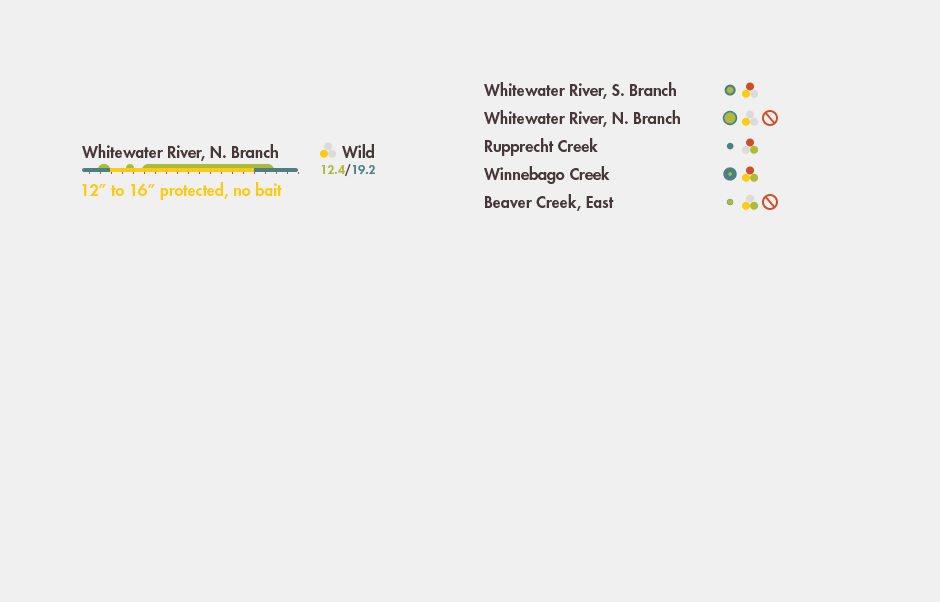
<style>
.page{position:relative;width:940px;height:602px;background:#f0f0f0}
.page>*{position:absolute;margin:0}
.t1{font:16px "FuturaStd-Heavy";color:#463838}
.t2{font:12px "FuturaStd-Heavy";color:#acbb39}
.t3{font:12px "FuturaStd-Heavy";color:#463838}
.t4{font:12px "FuturaStd-Heavy";color:#4e7f84}
.t5{font:16px "FuturaStd-Heavy";color:#fccc14}
</style>
<div class="page">
<p class="t1" style="left:484px;top:82px;width:192px;height:17px">Whitewater River, S. Branch</p>
<p class="t1" style="left:484px;top:110px;width:196px;height:17px">Whitewater River, N. Branch</p>
<p class="t1" style="left:82px;top:144px;width:196px;height:17px">Whitewater River, N. Branch</p>
<p class="t1" style="left:342px;top:144px;width:32px;height:14px">Wild</p>
<p class="t1" style="left:485px;top:138px;width:113px;height:18px">Rupprecht Creek</p>
<p class="t2" style="left:322px;top:164px;width:53px;height:13px">12.4<span class="t3">/</span><span class="t4">19.2</span></p>
<p class="t1" style="left:484px;top:166px;width:126px;height:18px">Winnebago Creek</p>
<p class="t5" style="left:82px;top:182px;width:200px;height:18px">12” to 16” protected, no bait</p>
<p class="t1" style="left:485px;top:194px;width:129px;height:17px">Beaver Creek, East</p>
</div>
